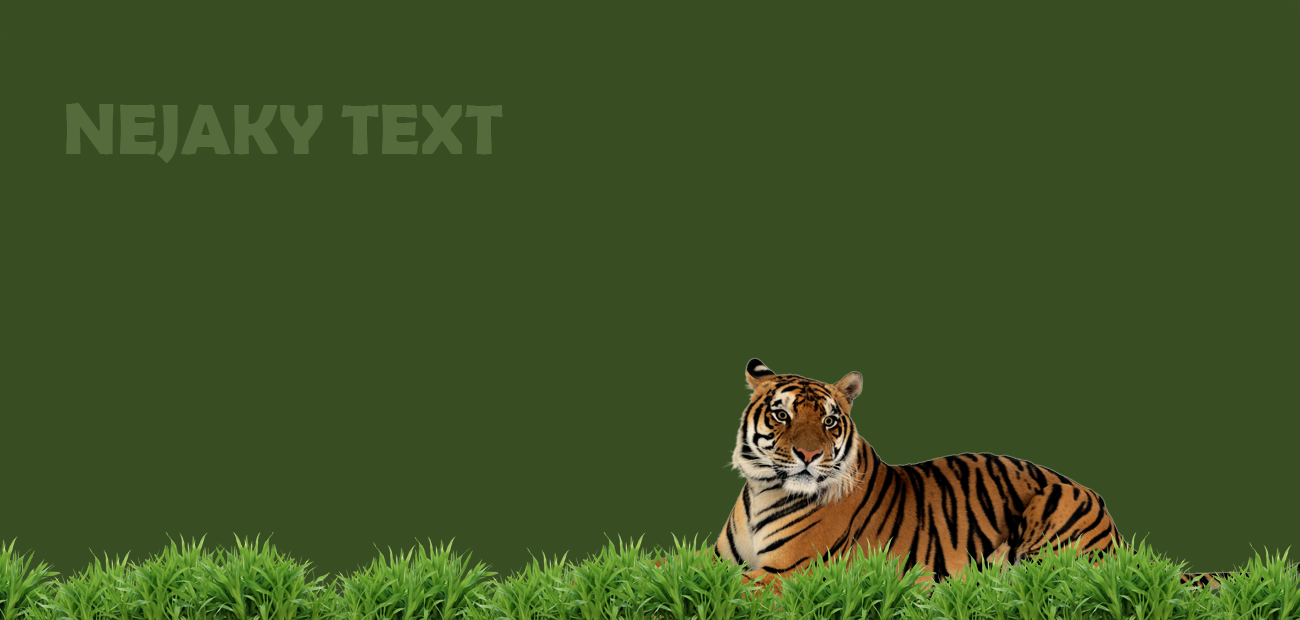
<style>
.page{position:relative;width:1300px;height:620px;background:#394d23}
.page>*{position:absolute;margin:0}
.t1{font:72px "BerlinSansFBDemi-Bold";color:#556b3c}
</style>
<div class="page">
<p class="t1" style="left:66px;top:103px;width:437px;height:60px">NEJAKY TEXT</p>
</div>
